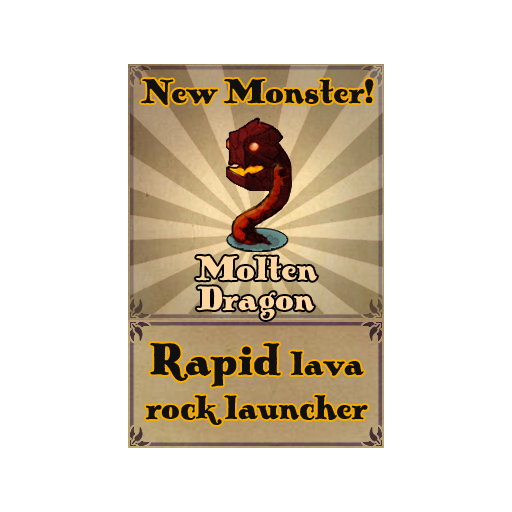
<style>
.page{position:relative;width:512px;height:512px;background:#ffffff}
.page>*{position:absolute;margin:0}
.t1{font:36px "PickworthOldStylePro";color:#101010}
.t2{font:36px/30px "PickworthOldStylePro";color:#ffd6a0}
.t3{font:48px "PickworthOldStylePro";color:#101010}
</style>
<div class="page">
<p class="t1" style="left:141px;top:78px;width:233px;height:27px">New Monster!</p>
<p class="t2" style="left:195px;top:255px;width:122px;height:65px">Molten<br>Dragon</p>
<p class="t1" style="left:145px;top:343px;width:223px;height:82px;text-align:center"><span class="t3">Rapid </span>lava rock launcher</p>
</div>
